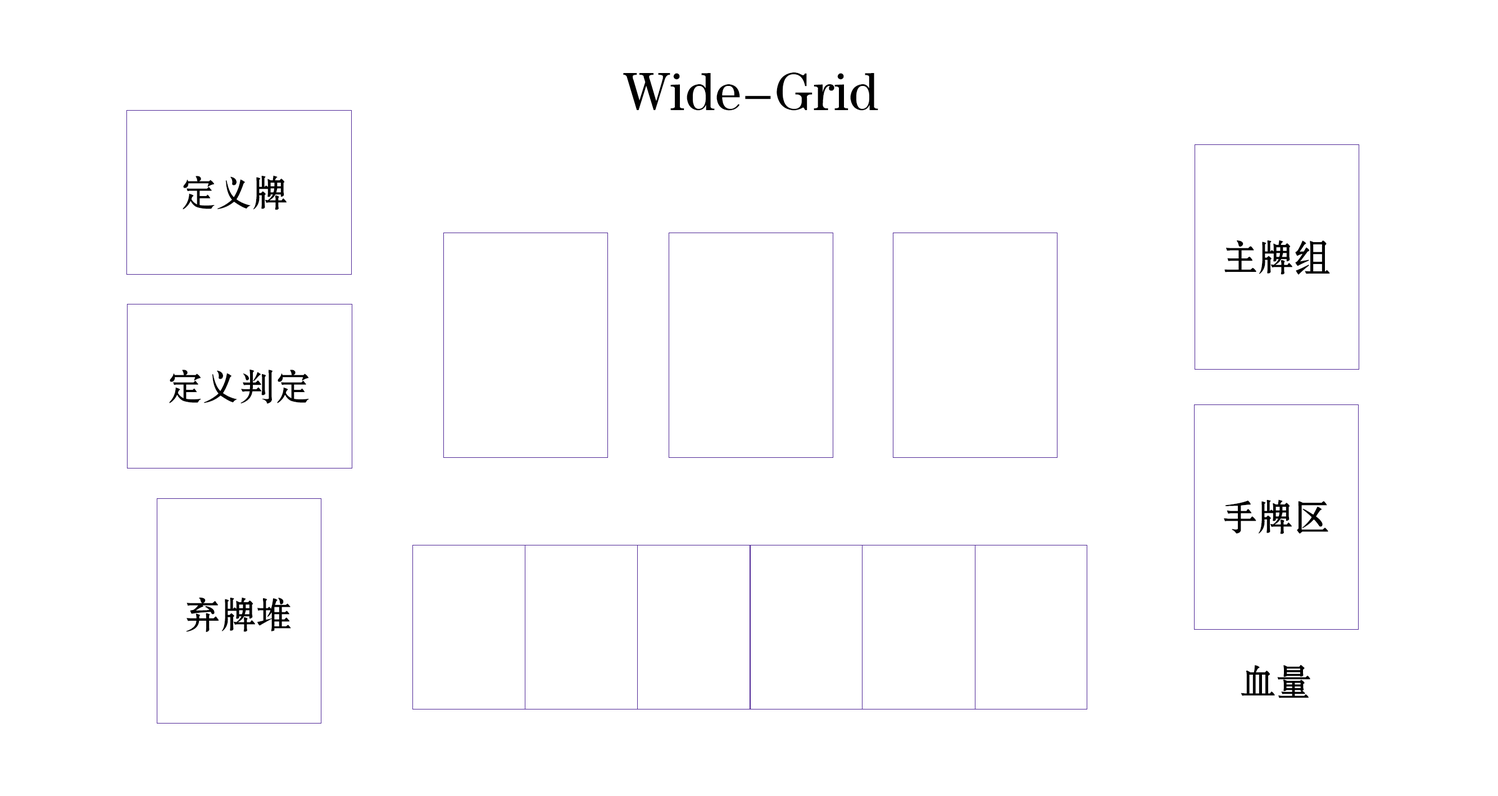
<style>
.page{position:relative;width:1498px;height:796px;background:#ffffff}
.page>*{position:absolute;margin:0}
.t1{font:54px "FZSHJW--GB1-0";color:#000000}
.t2{font:36px "FZSHJW--GB1-0";color:#000000}
</style>
<div class="page">
<p class="t1" style="left:623px;top:72px;width:255px;height:39px">Wide-Grid</p>
<p class="t2" style="left:183px;top:175px;width:104px;height:35px">定义牌</p>
<p class="t2" style="left:1224px;top:240px;width:106px;height:35px">主牌组</p>
<p class="t2" style="left:169px;top:370px;width:140px;height:34px">定义判定</p>
<p class="t2" style="left:1224px;top:499px;width:104px;height:35px">手牌区</p>
<p class="t2" style="left:186px;top:597px;width:105px;height:35px">弃牌堆</p>
<p class="t2" style="left:1241px;top:665px;width:69px;height:33px">血量</p>
</div>
